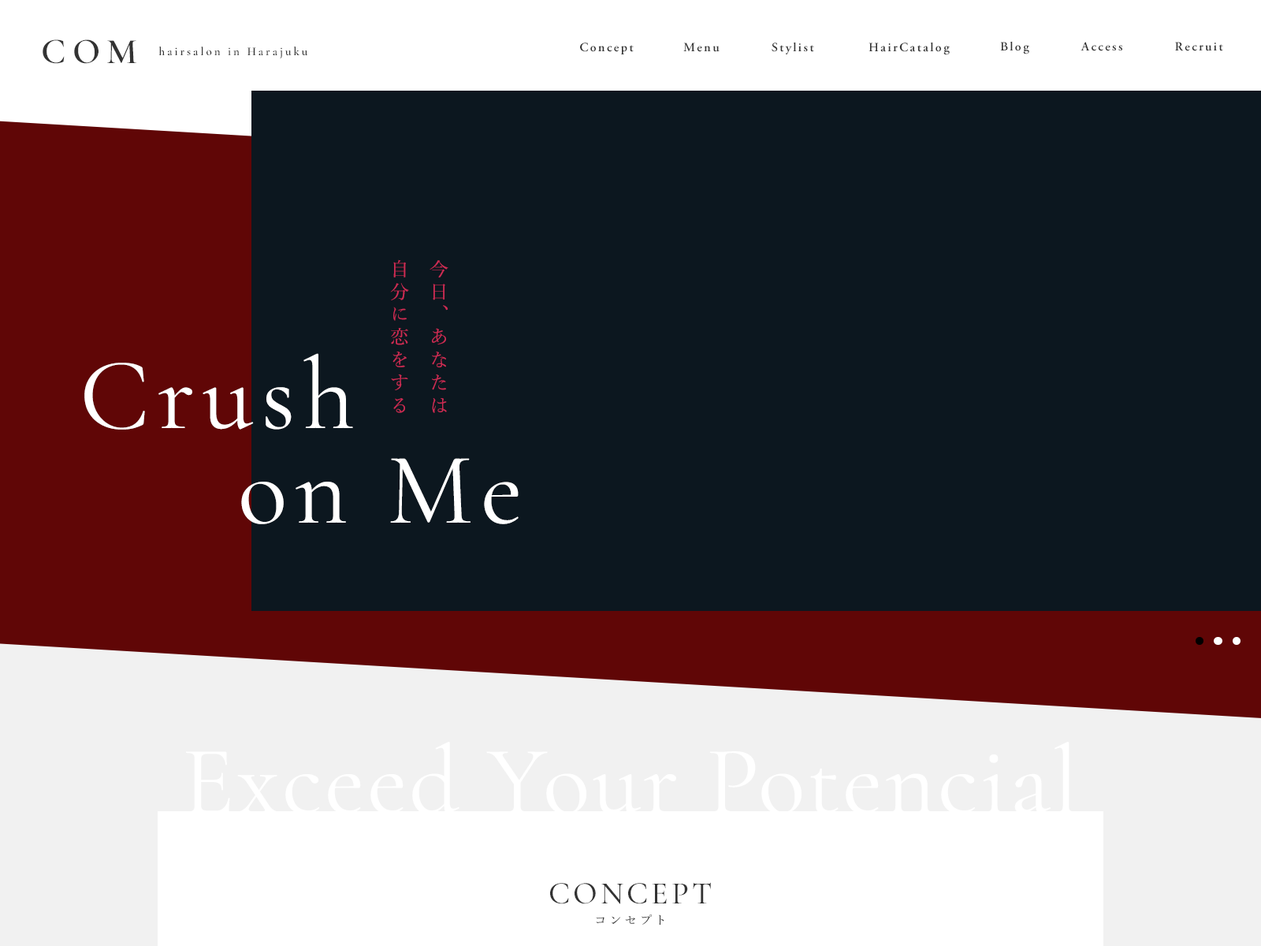
<style>
.page{position:relative;width:1261px;height:946px;background:#0c171f}
.page>*{position:absolute;margin:0}
.t1{font:36.3px "CormorantGaramond-SemiBold";letter-spacing:0.2em;color:#333333}
.t2{font:12.6px "AGaramondPro-Semibold";letter-spacing:0.15em;color:#333333}
.t3{font:11.8px "CormorantGaramond-SemiBold";letter-spacing:0.2em;color:#333333}
.t4{font:18.9px/39.4px "YuMin-Medium";letter-spacing:0.2em;color:#cf2c54}
.t5{font:102.4px/94.6px "CormorantGaramond-Regular";letter-spacing:0.075em;color:#ffffff}
.t6{font:97.7px "CormorantGaramond-Regular";letter-spacing:0.025em;color:#ffffff}
.t7{font:31.5px "CormorantGaramond-Medium";letter-spacing:0.1em;color:#333333}
.t8{font:12.6px "YuMin-Medium";letter-spacing:0.2em;color:#333333}
</style>
<div class="page">
<p class="t1" style="left:43px;top:39px;width:93px;height:25px">COM</p>
<p class="t2" style="left:772px;top:42px;width:42px;height:12px">Stylist</p>
<p class="t2" style="left:868px;top:42px;width:82px;height:13px">HairCatalog</p>
<p class="t2" style="left:1000px;top:41px;width:29px;height:13px">Blog</p>
<p class="t2" style="left:1080px;top:42px;width:42px;height:9px">Access</p>
<p class="t2" style="left:1175px;top:42px;width:48px;height:9px">Recruit</p>
<p class="t3" style="left:158px;top:46px;width:150px;height:13px">hairsalon in Harajuku</p>
<p class="t2" style="left:580px;top:43px;width:54px;height:11px">Concept</p>
<p class="t2" style="left:683px;top:43px;width:37px;height:9px">Menu</p>
<p class="t4" style="left:390px;top:259px;width:58px;height:154px">今日、あなたは<br>自分に恋をする</p>
<p class="t5" style="left:84px;top:353px;width:435px;height:171px">Crush<br>     on Me</p>
<p class="t6" style="left:186px;top:742px;width:890px;height:72px">Exceed Your Potencial</p>
<p class="t7" style="left:550px;top:882px;width:161px;height:22px">CONCEPT</p>
<p class="t8" style="left:596px;top:914px;width:68px;height:11px">コンセプト</p>
</div>
